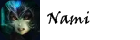
<style>
.page{position:relative;width:140px;height:40px;background:#ffffff}
.page>*{position:absolute;margin:0}
.t1{font:12px "VinerHandITC";color:#000000}
</style>
<div class="page">
<p class="t1" style="left:47px;top:11px;width:43px;height:14px">Nami</p>
</div>
